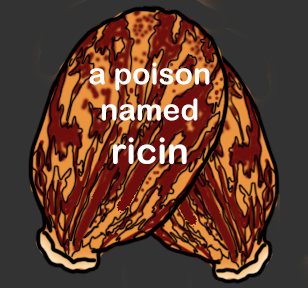
<style>
.page{position:relative;width:308px;height:288px;background:#333333}
.page>*{position:absolute;margin:0}
.t1{font:30px "ArialRoundedMTBold";color:#ffffff}
.t2{font:36px "ArialRoundedMTBold";color:#ffffff}
</style>
<div class="page">
<p class="t1" style="left:89px;top:62px;width:121px;height:102px;text-align:center">a poison named <br><span class="t2">ricin</span></p>
</div>
